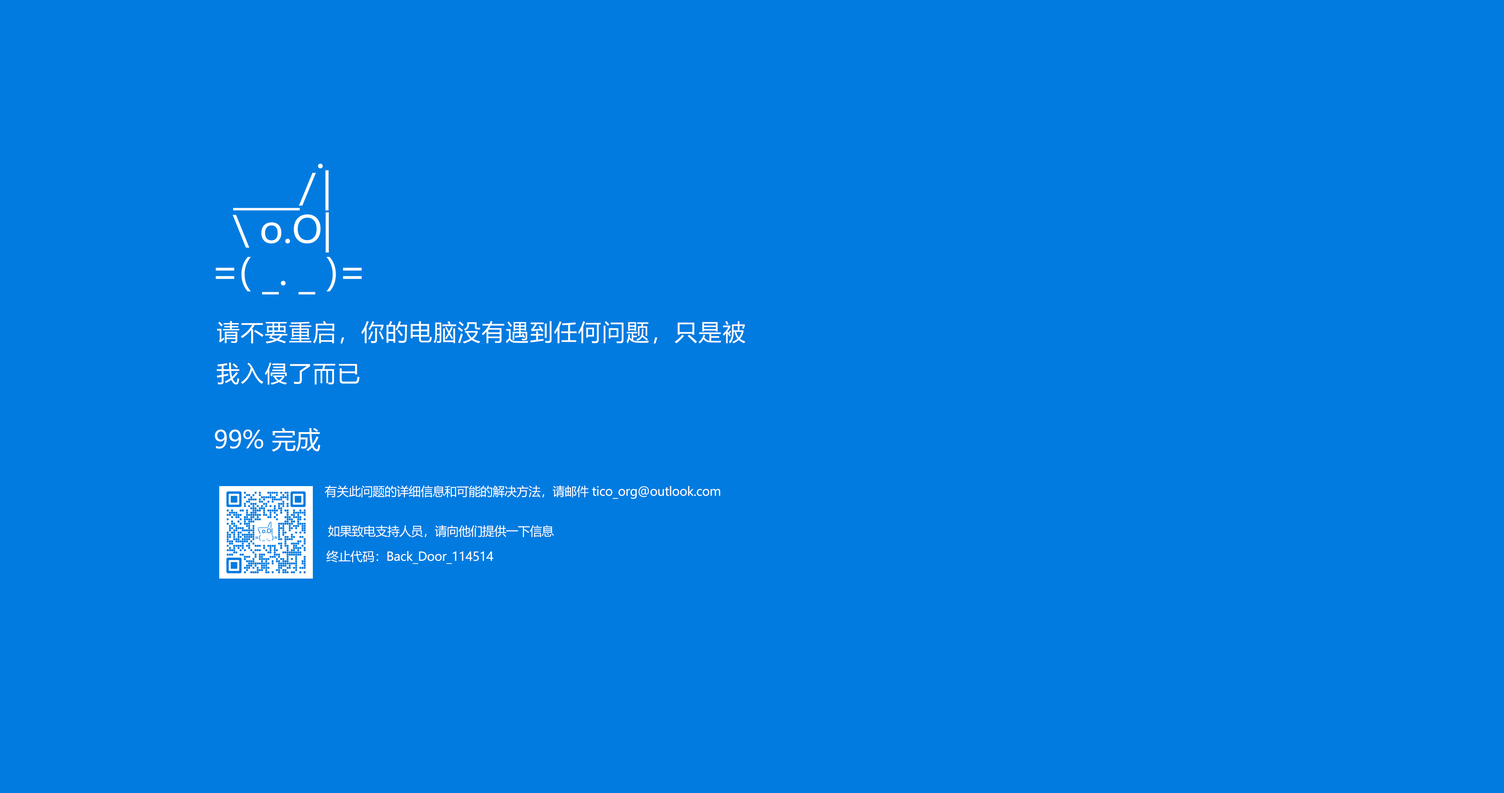
<style>
.page{position:relative;width:1504px;height:793px;background:#017be0}
.page>*{position:absolute;margin:0}
.t1{font:22.9px/41.3px "MicrosoftYaHei";letter-spacing:0.05em;color:#ffffff}
.t2{font:24.5px "MicrosoftYaHei";color:#ffffff}
.t3{font:12.2px/19.9px "MicrosoftYaHei";letter-spacing:-0.02em;color:#ffffff}
.t4{font:12.2px/19.9px "MicrosoftYaHei";letter-spacing:-0.03em;color:#ffffff}
.t5{font:12.2px "MicrosoftYaHei";letter-spacing:-0.02em;color:#ffffff}
</style>
<div class="page">
<p class="t1" style="left:217px;top:321px;width:528px;height:64px">请不要重启，你的电脑没有遇到任何问题，只是被我入侵了而已</p>
<p class="t2" style="left:215px;top:428px;width:105px;height:24px">99% 完成</p>
<p class="t3" style="left:325px;top:485px;width:395px;height:52px">有关此问题的详细信息和可能的解决方法，请邮件 tico_org@outlook.com<br><br><span class="t4"> 如果致电支持人员，请向他们提供一下信息</span></p>
<p class="t5" style="left:326px;top:550px;width:167px;height:14px">终止代码：Back_Door_114514</p>
</div>
